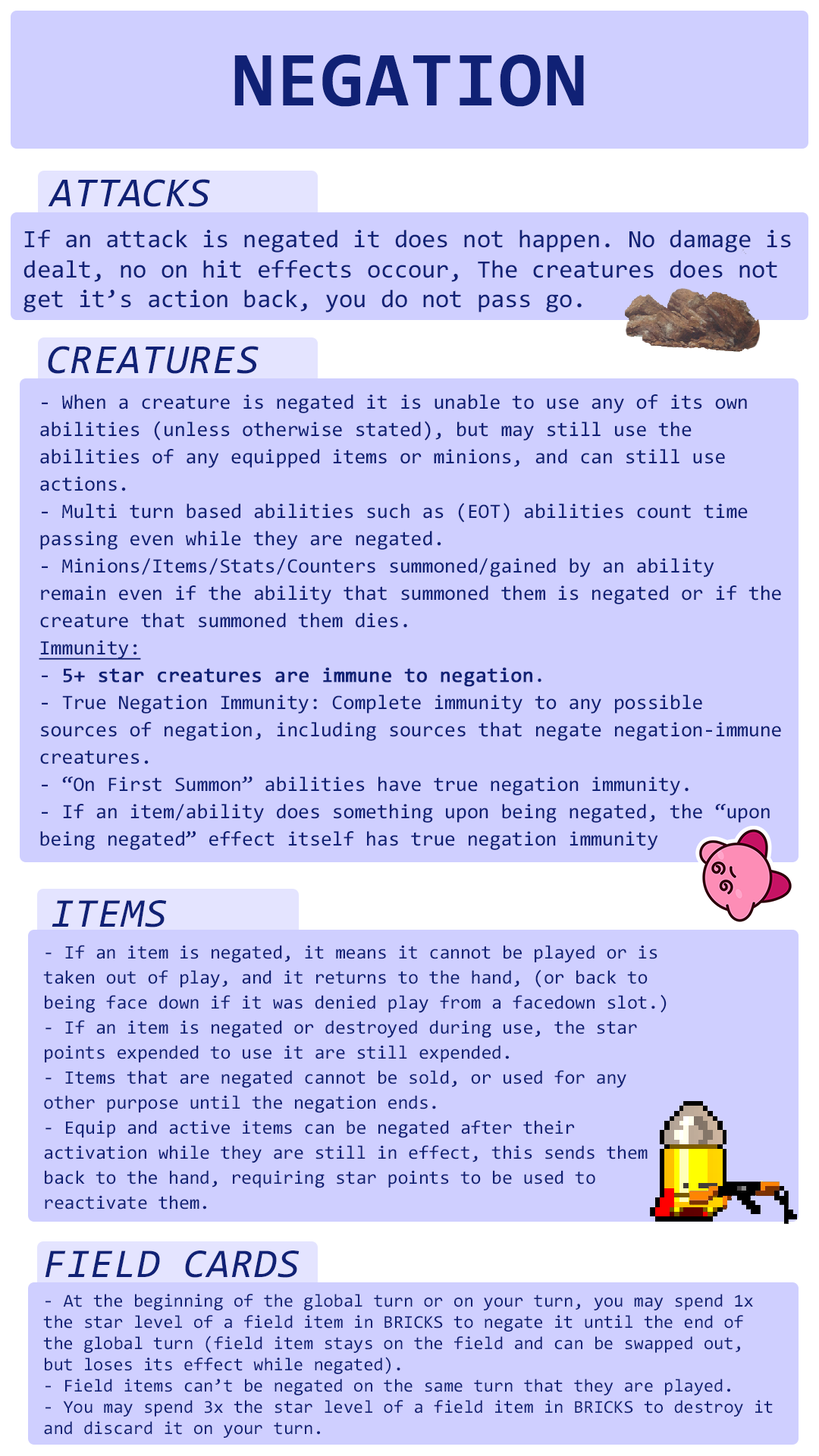
<style>
.page{position:relative;width:819px;height:1456px;background:#cfcfff}
.page>*{position:absolute;margin:0}
.t1{font:78.3px "Consolas-Bold";letter-spacing:0.02em;color:#102175}
.t2{font:41.7px "Consolas-Italic";color:#102175}
.t3{font:25px "Consolas";color:#102175}
.t4{font:41.7px "Consolas-Italic";letter-spacing:0.02em;color:#102175}
.t5{font:20.5px/27.3px "Consolas";color:#102175}
.t6{font:20.5px/27.3px "Consolas";color:#102175;text-decoration:underline}
.t7{font:20.5px/27.3px "Consolas";color:#102175;font-weight:bold}
.t8{font:41.1px "Consolas-Italic";letter-spacing:0.02em;color:#102175}
.t9{font:19px/25px "Consolas";color:#102175}
.t10{font:18.2px/21.2px "Consolas";color:#102175}
</style>
<div class="page">
<p class="t1" style="left:234px;top:55px;width:350px;height:52px">NEGATION</p>
<p class="t2" style="left:48px;top:179px;width:162px;height:28px">ATTACKS</p>
<p class="t3" style="left:24px;top:230px;width:767px;height:82px">If an attack is negated it does not happen. No damage is dealt, no on hit effects occour, The creatures does not get it’s action back, you do not pass go.</p>
<p class="t4" style="left:48px;top:346px;width:211px;height:28px">CREATURES</p>
<p class="t5" style="left:39px;top:394px;width:742px;height:456px">- When a creature is negated it is unable to use any of its own abilities (unless otherwise stated), but may still use the abilities of any equipped items or minions, and can still use actions.<br>- Multi turn based abilities such as (EOT) abilities count time passing even while they are negated.<br>- Minions/Items/Stats/Counters summoned/gained by an ability remain even if the ability that summoned them is negated or if the creature that summoned them dies. <br><span class="t6">Immunity:<br></span>- <span class="t7">5+ star creatures are immune to negation</span>.<br>- True Negation Immunity: Complete immunity to any possible sources of negation, including sources that negate negation-immune creatures.<br>- “On First Summon” abilities have true negation immunity.<br>- If an item/ability does something upon being negated, the “upon being negated” effect itself has true negation immunity</p>
<p class="t8" style="left:52px;top:900px;width:115px;height:27px">ITEMS</p>
<p class="t9" style="left:43px;top:945px;width:624px;height:265px">- If an item is negated, it means it cannot be played or is taken out of play, and it returns to the hand, (or back to being face down if it was denied play from a facedown slot.)<br>- If an item is negated or destroyed during use, the star points expended to use it are still expended.<br>- Items that are negated cannot be sold, or used for any other purpose until the negation ends.<br>- Equip and active items can be negated after their activation while they are still in effect, this sends them back to the hand, requiring star points to be used to reactivate them.</p>
<p class="t8" style="left:45px;top:1250px;width:255px;height:28px">FIELD CARDS</p>
<p class="t10" style="left:43px;top:1294px;width:730px;height:144px">- At the beginning of the global turn or on your turn, you may spend 1x the star level of a field item in BRICKS to negate it until the end of the global turn (field item stays on the field and can be swapped out, but loses its effect while negated).<br>- Field items can’t be negated on the same turn that they are played.<br>- You may spend 3x the star level of a field item in BRICKS to destroy it and discard it on your turn.</p>
</div>
